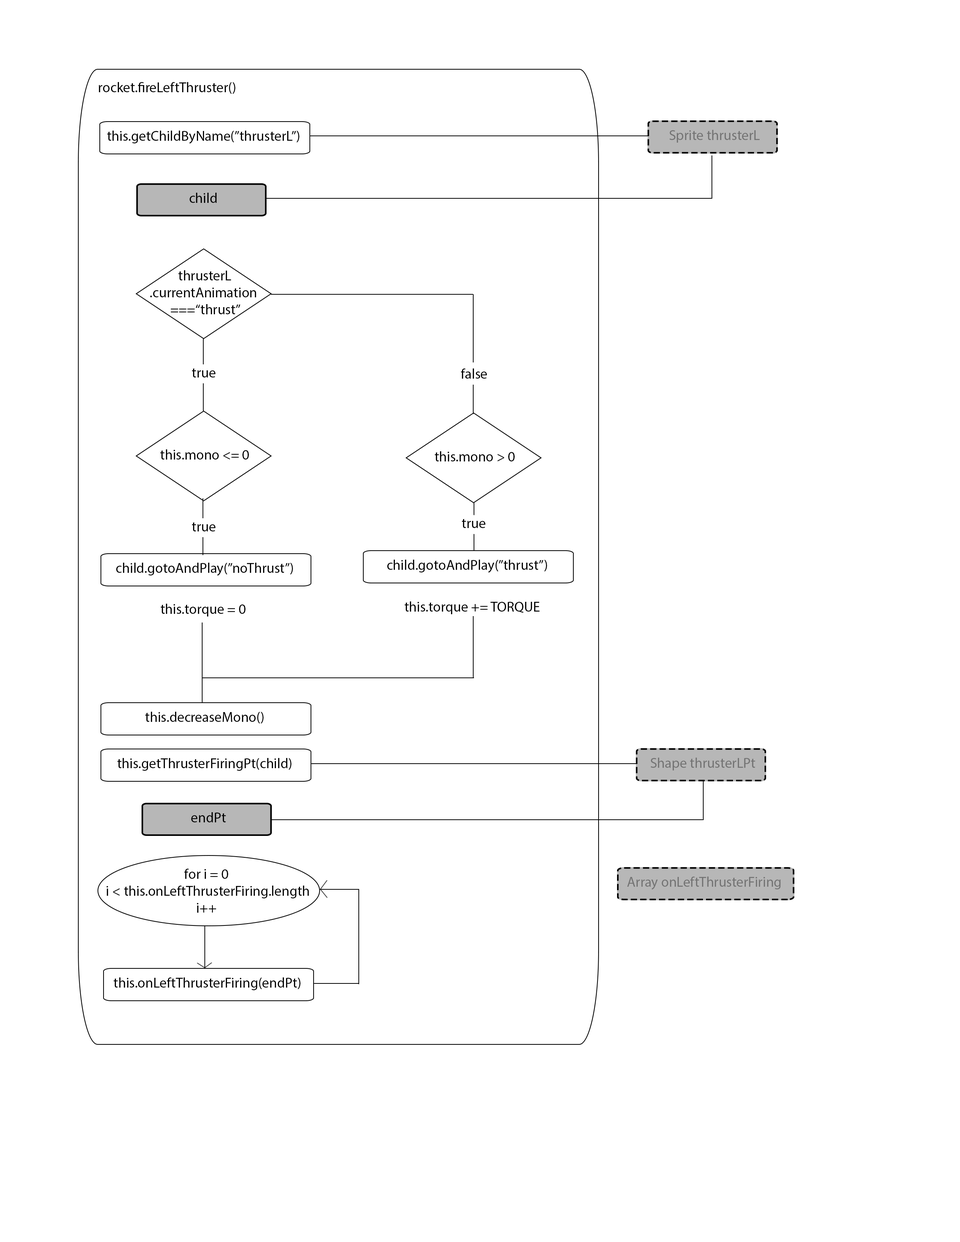
<style>
.page{position:relative;width:960px;height:1242px;background:#ffffff}
.page>*{position:absolute;margin:0}
.t1{font:14.1px "MyriadPro-Regular";color:#000000}
.t2{font:14.1px "MyriadPro-Regular";color:#737373}
</style>
<div class="page">
<p class="t1" style="left:99px;top:82px;width:136px;height:12px">rocket.fireLeftThruster()</p>
<p class="t1" style="left:107px;top:131px;width:192px;height:13px">this.getChildByName(”thrusterL”)</p>
<p class="t2" style="left:669px;top:130px;width:91px;height:13px">Sprite thrusterL</p>
<p class="t1" style="left:189px;top:193px;width:28px;height:10px">child</p>
<p class="t1" style="left:150px;top:270px;width:106px;height:44px;text-align:center">thrusterL<br>.currentAnimation <br>===“thrust”</p>
<p class="t1" style="left:192px;top:368px;width:24px;height:10px">true</p>
<p class="t1" style="left:461px;top:369px;width:26px;height:10px">false</p>
<p class="t1" style="left:160px;top:449px;width:89px;height:11px">this.mono &lt;= 0</p>
<p class="t1" style="left:435px;top:451px;width:80px;height:11px">this.mono &gt; 0</p>
<p class="t1" style="left:462px;top:519px;width:24px;height:9px">true</p>
<p class="t1" style="left:192px;top:522px;width:24px;height:10px">true</p>
<p class="t1" style="left:116px;top:563px;width:177px;height:13px">child.gotoAndPlay(”noThrust”)</p>
<p class="t1" style="left:387px;top:560px;width:160px;height:13px">child.gotoAndPlay(”thrust”)</p>
<p class="t1" style="left:161px;top:604px;width:84px;height:13px">this.torque = 0</p>
<p class="t1" style="left:405px;top:602px;width:134px;height:12px">this.torque += TORQUE</p>
<p class="t1" style="left:145px;top:712px;width:119px;height:12px">this.decreaseMono()</p>
<p class="t1" style="left:117px;top:758px;width:174px;height:13px">this.getThrusterFiringPt(child)</p>
<p class="t2" style="left:650px;top:758px;width:105px;height:13px">Shape thrusterLPt</p>
<p class="t1" style="left:191px;top:812px;width:35px;height:11px">endPt</p>
<p class="t1" style="left:107px;top:869px;width:202px;height:44px;text-align:center">for i = 0<br> i &lt; this.onLeftThrusterFiring.length<br>i++</p>
<p class="t2" style="left:627px;top:877px;width:154px;height:13px">Array onLeftThrusterFiring</p>
<p class="t1" style="left:114px;top:978px;width:186px;height:12px">this.onLeftThrusterFiring(endPt)</p>
</div>
